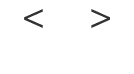
<style>
.page{position:relative;width:134px;height:74px;background:#ffffff}
.page>*{position:absolute;margin:0}
.t1{font:35.9px "VantaLightPlain";color:#333333}
.t2{font:36px "VantaLightPlain";color:#333333}
</style>
<div class="page">
<p class="t1" style="left:24px;top:9px;width:19px;height:19px;rotate:180deg">&gt;</p>
<p class="t2" style="left:91px;top:9px;width:19px;height:19px">&gt;</p>
</div>
